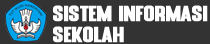
<style>
.page{position:relative;width:210px;height:44px;background:#333333}
.page>*{position:absolute;margin:0}
.t1{font:22px/21px "Blue-Fonte-Sans";color:#ffffff;font-weight:bold;scale:1.03 1}
</style>
<div class="page">
<p class="t1" style="left:53px;top:5px;width:155px;height:38px">sistem informasi<br>sekolah</p>
</div>
